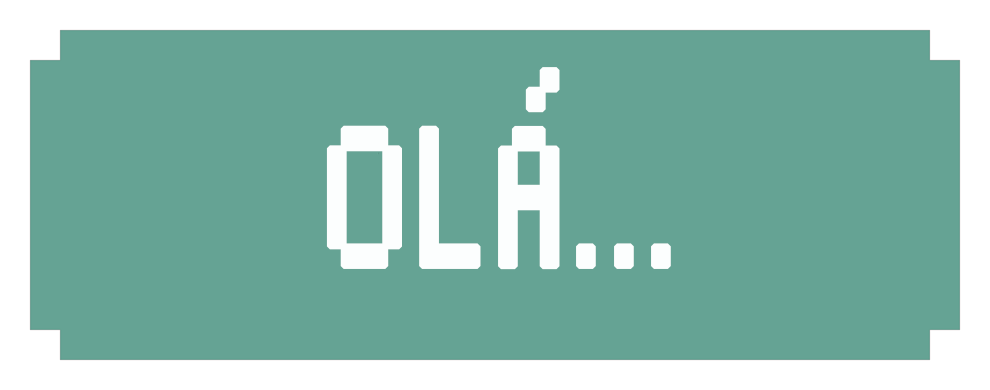
<style>
.page{position:relative;width:990px;height:390px;background:#65a394}
.page>*{position:absolute;margin:0}
.t1{font:255px "Pixelade";letter-spacing:0.025em;color:#fcfefe;font-weight:bold;scale:0.71 1}
</style>
<div class="page">
<p class="t1" style="left:326px;top:67px;width:345px;height:203px">OLÁ...</p>
</div>
